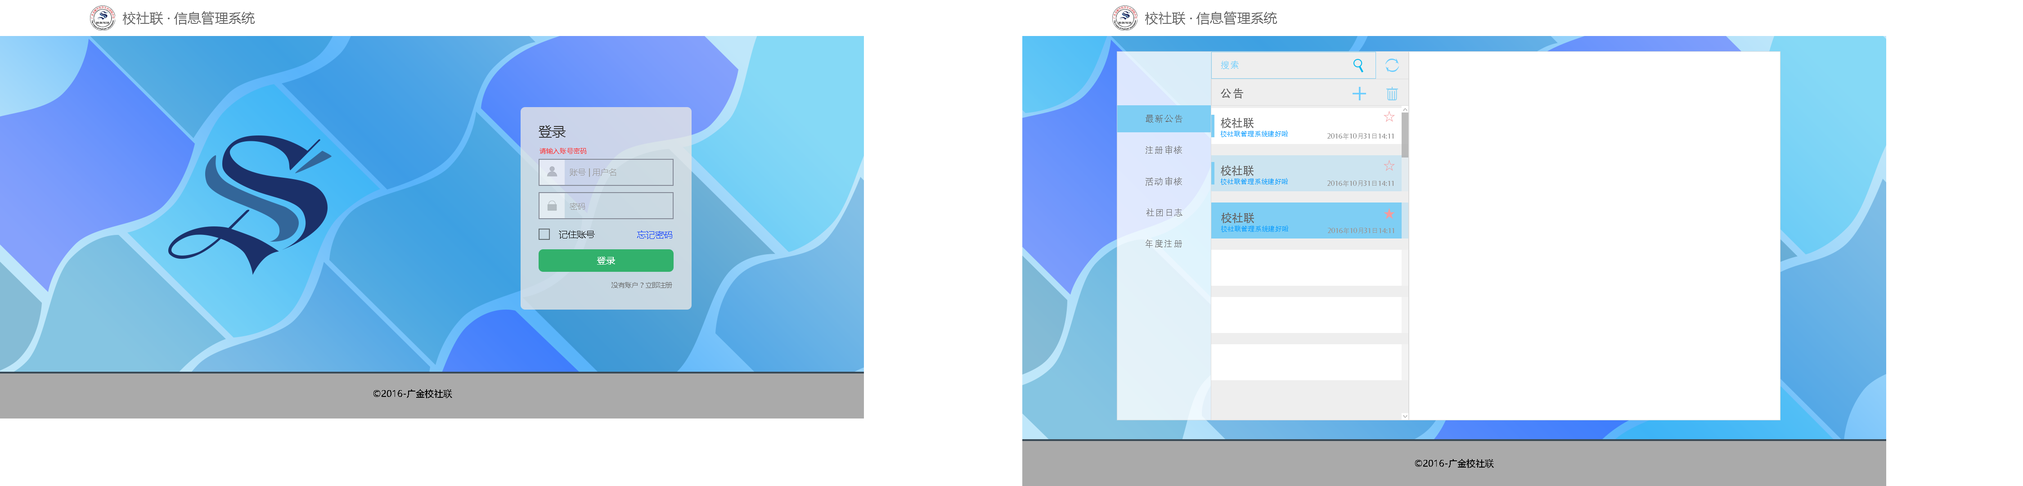
<style>
.page{position:relative;width:2023px;height:486px;background:#ffffff}
.page>*{position:absolute;margin:0}
.t1{font:13.5px "MicrosoftYaHei";color:#666666}
.t2{font:9px "AdobeHeitiStd-Regular";letter-spacing:0.075em;color:#66ccff}
.t3{font:11.2px "AdobeHeitiStd-Regular";letter-spacing:0.075em;color:#666666}
.t4{font:13.5px "MicrosoftYaHei";color:#333333}
.t5{font:9px "AdobeHeitiStd-Regular";letter-spacing:0.075em;color:#666666}
.t6{font:11.2px "AdobeHeitiStd-Regular";color:#666666}
.t7{font:6.8px "AdobeHeitiStd-Regular";color:#0099ff}
.t8{font:6.8px "AdobeHeitiStd-Regular";color:#999999}
.t9{font:6.8px "MicrosoftYaHei";color:#ff3333}
.t10{font:8.1px "MicrosoftYaHei";color:#999999}
.t11{font:9px "MicrosoftYaHei";color:#000000}
.t12{font:9px "MicrosoftYaHei";color:#0033ff}
.t13{font:9px "MicrosoftYaHei";color:#ffffff}
.t14{font:6.8px "MicrosoftYaHei";color:#666666}
</style>
<div class="page">
<p class="t1" style="left:123px;top:11px;width:132px;height:14px">校社联 · 信息管理系统</p>
<p class="t1" style="left:1145px;top:11px;width:132px;height:14px">校社联 · 信息管理系统</p>
<p class="t2" style="left:1221px;top:61px;width:17px;height:8px">搜索</p>
<p class="t3" style="left:1221px;top:88px;width:22px;height:11px">公告</p>
<p class="t4" style="left:539px;top:125px;width:27px;height:13px">登录</p>
<p class="t5" style="left:1146px;top:115px;width:37px;height:8px">最新公告</p>
<p class="t6" style="left:1221px;top:117px;width:33px;height:11px">校社联</p>
<p class="t7" style="left:1221px;top:130px;width:67px;height:7px">校社联管理系统建好啦</p>
<p class="t8" style="left:1328px;top:133px;width:66px;height:7px">2016年10月31日14:11</p>
<p class="t9" style="left:540px;top:148px;width:46px;height:6px">请输入账号密码</p>
<p class="t5" style="left:1146px;top:145px;width:36px;height:9px">注册审核</p>
<p class="t10" style="left:570px;top:168px;width:46px;height:9px">账号 | 用户名</p>
<p class="t6" style="left:1221px;top:165px;width:33px;height:11px">校社联</p>
<p class="t5" style="left:1146px;top:177px;width:36px;height:9px">活动审核</p>
<p class="t7" style="left:1221px;top:178px;width:67px;height:7px">校社联管理系统建好啦</p>
<p class="t8" style="left:1328px;top:180px;width:66px;height:7px">2016年10月31日14:11</p>
<p class="t10" style="left:570px;top:202px;width:15px;height:8px">密码</p>
<p class="t5" style="left:1147px;top:208px;width:36px;height:8px">社团日志</p>
<p class="t6" style="left:1221px;top:212px;width:33px;height:11px">校社联</p>
<p class="t11" style="left:559px;top:230px;width:36px;height:8px">记住账号</p>
<p class="t12" style="left:637px;top:230px;width:35px;height:9px">忘记密码</p>
<p class="t7" style="left:1221px;top:225px;width:67px;height:7px">校社联管理系统建好啦</p>
<p class="t8" style="left:1328px;top:228px;width:66px;height:6px">2016年10月31日14:11</p>
<p class="t5" style="left:1146px;top:239px;width:36px;height:9px">年度注册</p>
<p class="t13" style="left:597px;top:256px;width:18px;height:9px">登录</p>
<p class="t14" style="left:612px;top:282px;width:60px;height:6px">没有账户？立即注册</p>
<p class="t11" style="left:374px;top:389px;width:78px;height:9px">©2016-广金校社联</p>
<p class="t11" style="left:1415px;top:459px;width:79px;height:9px">©2016-广金校社联</p>
</div>
